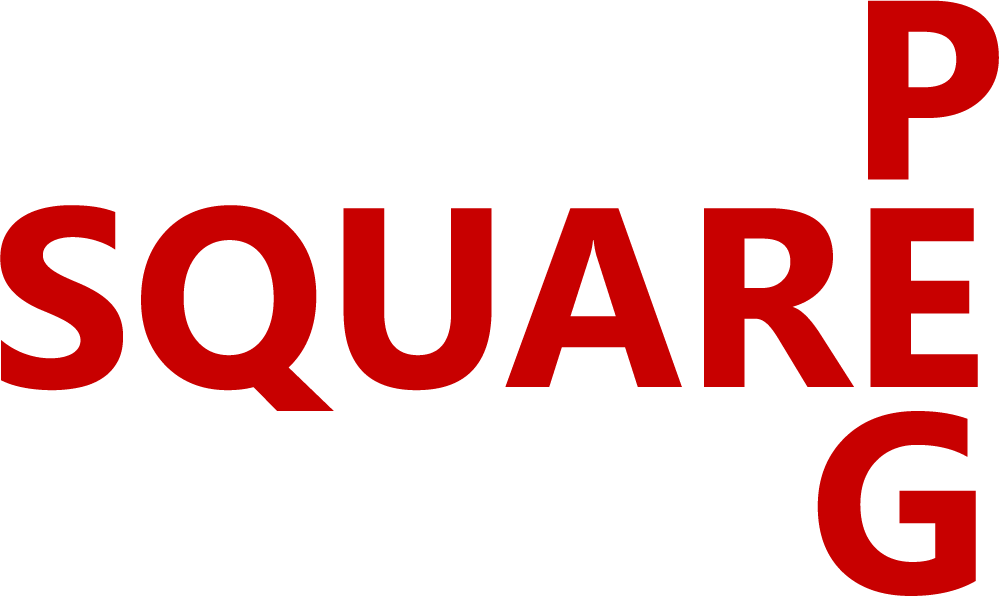
<style>
.page{position:relative;width:1000px;height:597px;background:#ffffff}
.page>*{position:absolute;margin:0}
.t1{font:255.1px "SegoeUI-Bold";color:#c80000}
</style>
<div class="page">
<p class="t1" style="left:868px;top:0px;width:131px;height:180px">P</p>
<p class="t1" style="left:0px;top:205px;width:978px;height:206px">SQUARE</p>
<p class="t1" style="left:817px;top:411px;width:159px;height:185px">G</p>
</div>
